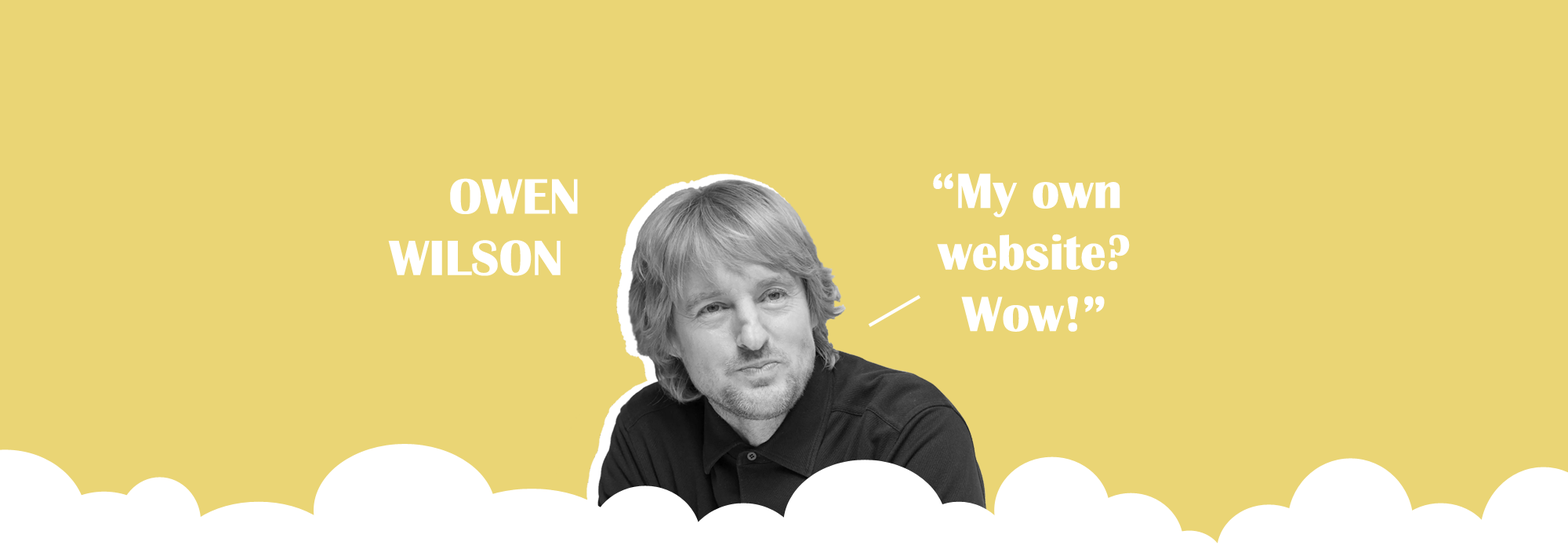
<style>
.page{position:relative;width:1568px;height:549px;background:#ead575}
.page>*{position:absolute;margin:0}
.t1{font:51.3px "BritannicBold";color:#ffffff}
</style>
<div class="page">
<p class="t1" style="left:933px;top:172px;width:197px;height:160px;text-align:center">“My own<br> website?<br> Wow!”</p>
<p class="t1" style="left:388px;top:178px;width:190px;height:98px;text-align:center">OWEN<br>   WILSON</p>
</div>
